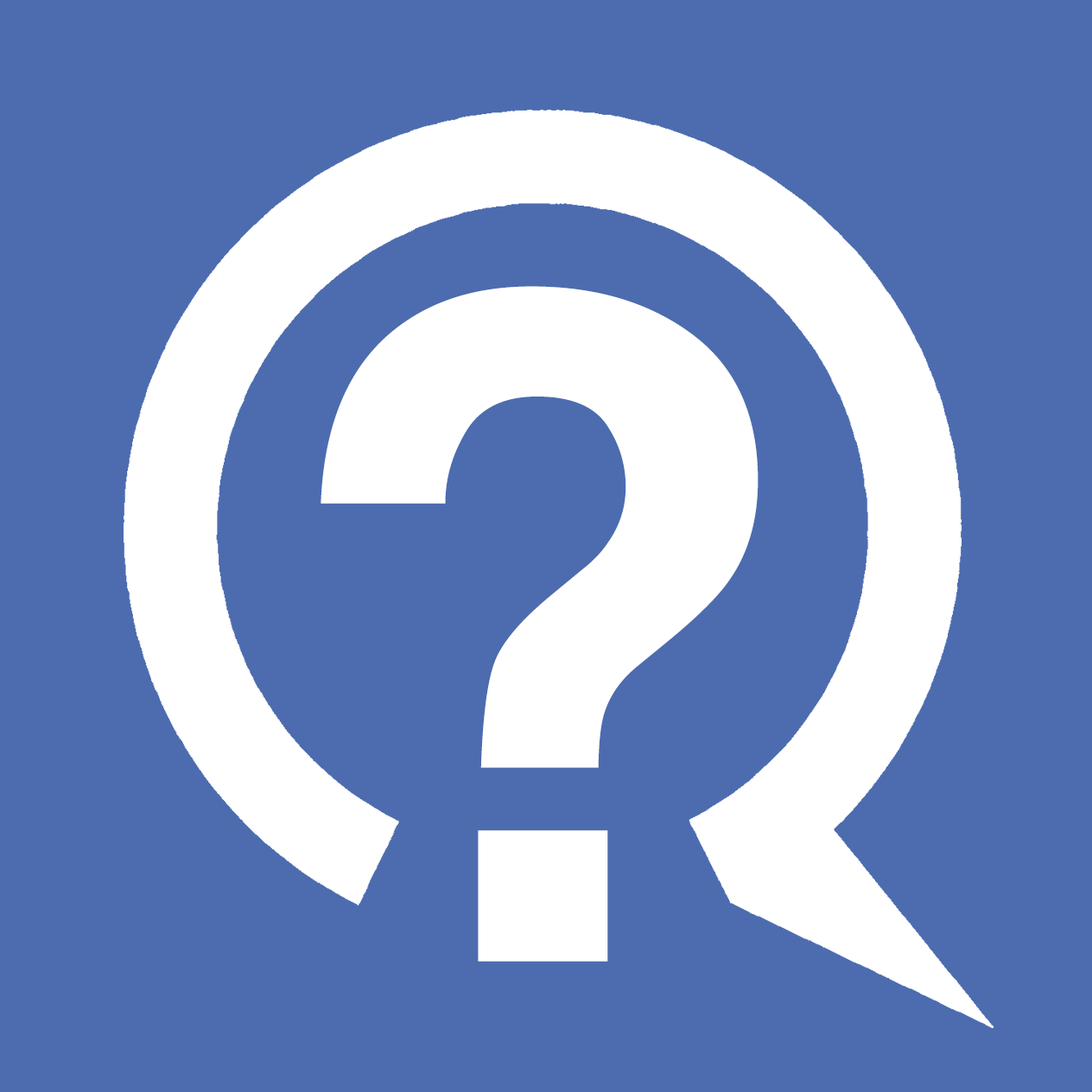
<style>
.page{position:relative;width:1092px;height:1092px;background:#4c6caf}
.page>*{position:absolute;margin:0}
.t1{font:927.7px "Helvetica-Bold";color:#ffffff;scale:0.95 1}
</style>
<div class="page">
<p class="t1" style="left:321px;top:286px;width:438px;height:676px">?</p>
</div>
